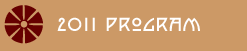
<style>
.page{position:relative;width:247px;height:51px;background:#cc9966}
.page>*{position:absolute;margin:0}
.t1{font:48px "P22ArtsAndCraftsOrnaments";letter-spacing:0.05em;color:#660000}
.t2{font:18.7px "P22ArtsAndCrafts";letter-spacing:0.05em;color:#ffffff}
</style>
<div class="page">
<p class="t1" style="left:4px;top:5px;width:39px;height:39px">d</p>
<p class="t2" style="left:57px;top:17px;width:143px;height:14px">2011 Program</p>
</div>
